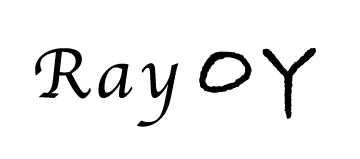
<style>
.page{position:relative;width:360px;height:159px;background:#ffffff}
.page>*{position:absolute;margin:0}
.t1{font:72px "Apple-Chancery";letter-spacing:0.1em;color:#000000}
.t2{font:80px "BradleyHandITCTT-Bold";letter-spacing:0.1em;color:#000000}
</style>
<div class="page">
<p class="t1" style="left:35px;top:48px;width:144px;height:79px">Ray</p>
<p class="t2" style="left:199px;top:47px;width:117px;height:72px">OY</p>
</div>
